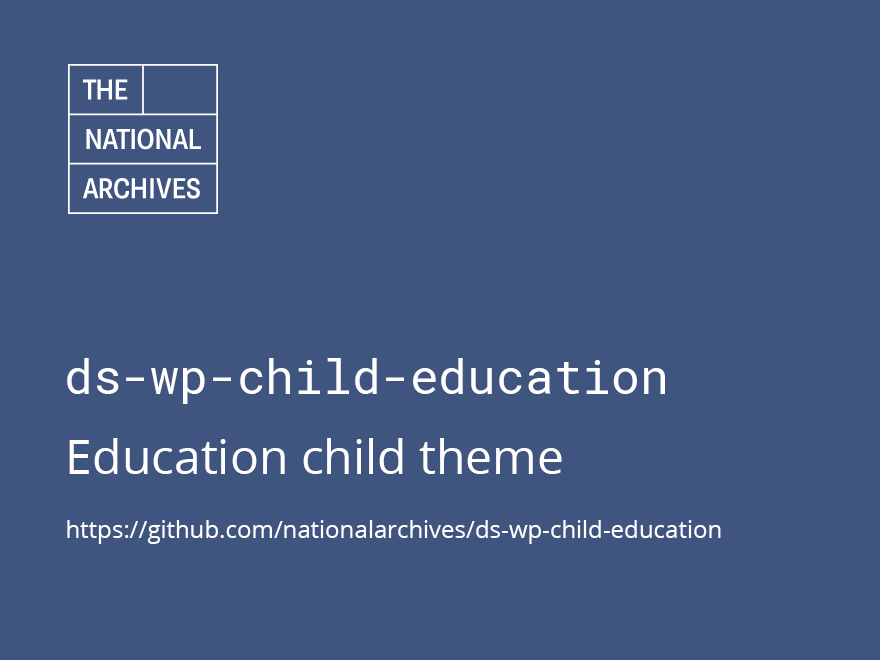
<style>
.page{position:relative;width:880px;height:660px;background:#405480}
.page>*{position:absolute;margin:0}
.t1{font:48px "RobotoMono-Regular";color:#ffffff}
.t2{font:24px "OpenSans";color:#ffffff}
.t3{font:48px "OpenSans";color:#ffffff}
</style>
<div class="page">
<p class="t1" style="left:67px;top:358px;width:598px;height:46px">ds-wp-child-education</p>
<p class="t2" style="left:67px;top:438px;width:654px;height:106px"><span class="t3">Education child theme<br><br></span>https://github.com/nationalarchives/ds-wp-child-education</p>
</div>
